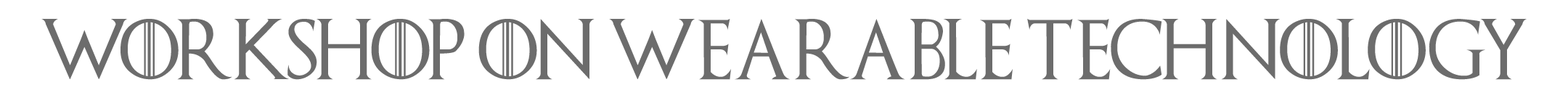
<style>
.page{position:relative;width:1568px;height:98px;background:#ffffff}
.page>*{position:absolute;margin:0}
.t1{font:60.5px "GameofThrones";color:#6c6c6c;scale:0.96 1}
</style>
<div class="page">
<p class="t1" style="left:41px;top:19px;width:1486px;height:61px">workshop on wearable technology</p>
</div>
